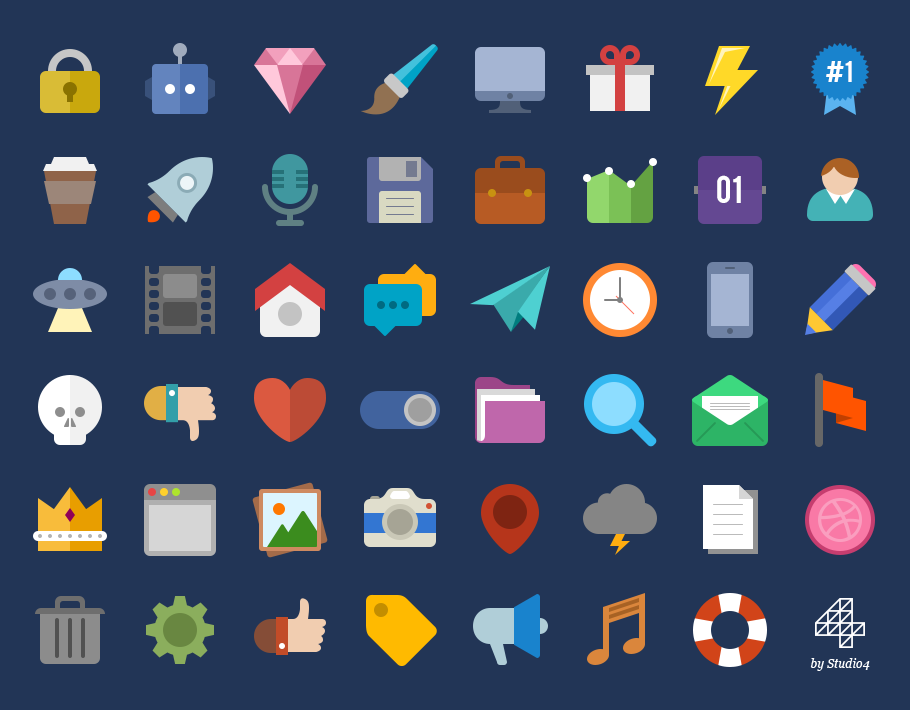
<style>
.page{position:relative;width:910px;height:710px;background:#223556}
.page>*{position:absolute;margin:0}
.t1{font:24px "Bebas";color:#ffffff}
.t2{font:30px "Bebas";color:#ffffff}
</style>
<div class="page">
<p class="t1" style="left:826px;top:61px;width:26px;height:21px">#1</p>
<p class="t2" style="left:717px;top:175px;width:24px;height:28px">01</p>
</div>
